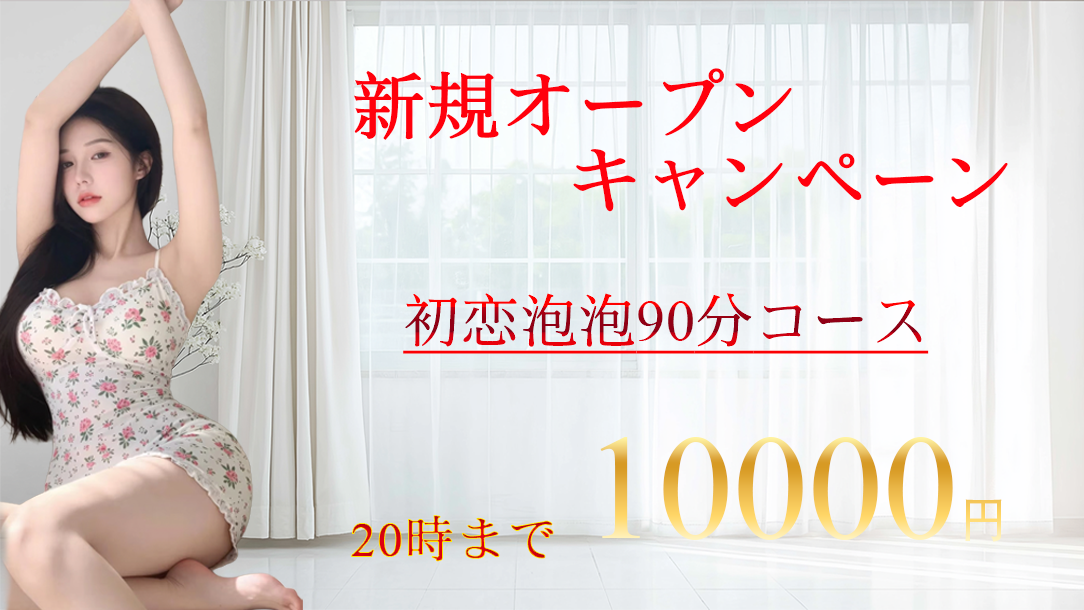
<style>
.page{position:relative;width:1084px;height:610px}
.page>*{position:absolute;margin:0}
.t1{font:75px/75px "SimSong-Bold";color:#ff000c}
.t2{font:58.3px "SimSong-Regular";text-decoration:underline}
.t3{font:58.3px "TimesNewRomanPSMT";text-decoration:underline}
.t4{font:150px "TimesNewRomanPSMT"}
.t5{font:50px "AdobeHeitiStd-Regular"}
.t6{font:50px "SimSong-Regular";font-weight:bold}
.t7{font:50px "TimesNewRomanPSMT";font-weight:bold}
</style>
<div class="page">
<p class="t1" style="left:354px;top:68px;width:654px;height:144px">新規オープン<br>      キャンペーン</p>
<p class="t2" style="left:403px;top:293px;width:526px;height:61px">初恋泡泡<span class="t3">90</span>分コース</p>
<p class="t4" style="left:600px;top:437px;width:402px;height:105px">10000<span class="t5">円</span></p>
<p class="t6" style="left:351px;top:515px;width:203px;height:47px"><span class="t7">20</span>時まで</p>
</div>
